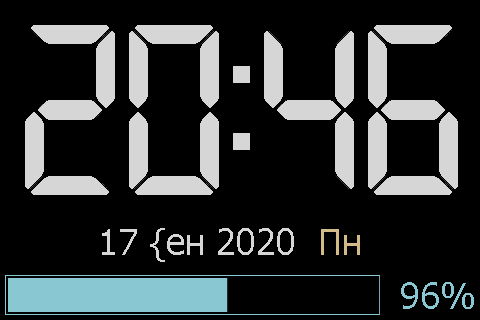
<style>
.page{position:relative;width:480px;height:320px;background:#000000}
.page>*{position:absolute;margin:0}
.t1{font:36px "Tahoma";color:#d6d6d6}
.t2{font:36px "Tahoma";color:#d3ba89}
.t3{font:36px "Tahoma";color:#89c8d3}
</style>
<div class="page">
<p class="t1" style="left:102px;top:228px;width:258px;height:34px">17 {ен 2020  <span class="t2">Пн</span></p>
<p class="t3" style="left:401px;top:282px;width:73px;height:27px">96%</p>
</div>
